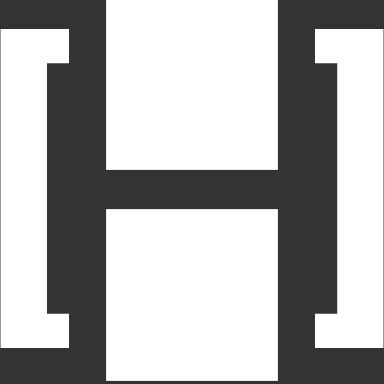
<style>
.page{position:relative;width:384px;height:384px;background:#ffffff}
.page>*{position:absolute;margin:0}
.t1{font:322.2px "Roboto-Bold";color:#ffffff}
</style>
<div class="page">
<p class="t1" style="left:0px;top:29px;width:384px;height:319px">[   ]</p>
</div>
